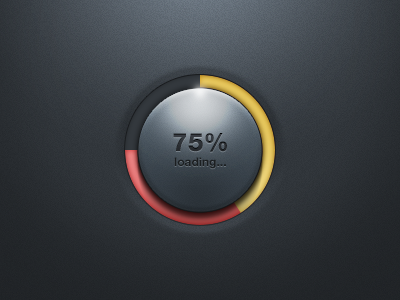
<style>
.page{position:relative;width:400px;height:300px}
.page>*{position:absolute;margin:0}
.t1{font:25px "HelveticaNeueLTCom-Hv";letter-spacing:0.003em;color:#24272b}
.t2{font:12px "HelveticaNeueLTCom-Bd";letter-spacing:0.003em;color:#1c1f21}
</style>
<div class="page">
<p class="t1" style="left:173px;top:133px;width:54px;height:19px">75%</p>
<p class="t2" style="left:174px;top:157px;width:52px;height:12px">loading...</p>
</div>
